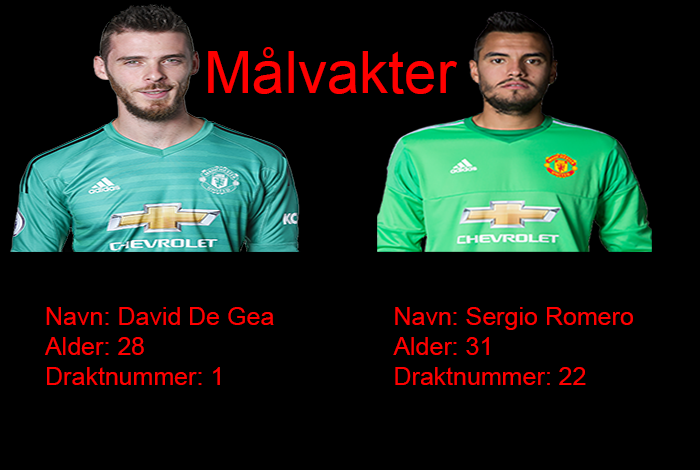
<style>
.page{position:relative;width:700px;height:470px;background:#000000}
.page>*{position:absolute;margin:0}
.t1{font:58.3px "ArialMT";color:#ff0000}
.t2{font:25px "ArialMT";color:#ff0000}
</style>
<div class="page">
<p class="t1" style="left:208px;top:47px;width:249px;height:47px">Målvakter</p>
<p class="t2" style="left:45px;top:307px;width:229px;height:78px">Navn: David De Gea<br>Alder: 28 <br>Draktnummer: 1</p>
<p class="t2" style="left:393px;top:307px;width:240px;height:78px">Navn: Sergio Romero<br>Alder: 31<br>Draktnummer: 22</p>
</div>
